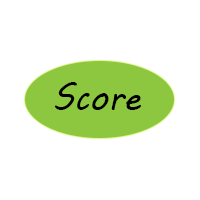
<style>
.page{position:relative;width:200px;height:200px;background:#ffffff}
.page>*{position:absolute;margin:0}
.t1{font:36px "MVBoli";color:#000000}
</style>
<div class="page">
<p class="t1" style="left:55px;top:82px;width:86px;height:28px">Score</p>
</div>
